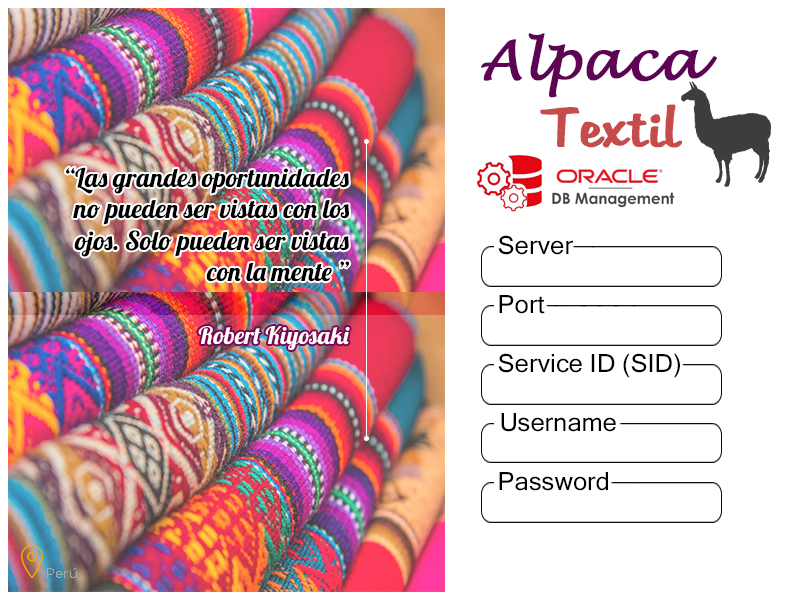
<style>
.page{position:relative;width:800px;height:600px;background:#ffffff}
.page>*{position:absolute;margin:0}
.t1{font:53.6px "LucidaHandwriting-Italic";color:#5f0455;font-weight:bold}
.t2{font:53.6px "Martina";color:#c64c4c;font-weight:bold}
.t3{font:26px "Lobster-Regular";color:#000000}
.t4{font:25px "MicrosoftSansSerif";color:#000000}
.t5{font:24px "Lobster-Regular";color:#fefeff}
.t6{font:14px "GothamBook";color:#aaa9a9}
</style>
<div class="page">
<p class="t1" style="left:481px;top:33px;width:236px;height:65px">Alpaca</p>
<p class="t2" style="left:540px;top:104px;width:142px;height:44px">Textil</p>
<p class="t3" style="left:66px;top:167px;width:284px;height:115px;text-align:right">“Las grandes oportunidades <br>no pueden ser vistas con los <br>ojos. Solo pueden ser vistas<br>con la mente ”</p>
<p class="t4" style="left:498px;top:235px;width:75px;height:20px">Server</p>
<p class="t4" style="left:499px;top:295px;width:46px;height:19px">Port</p>
<p class="t5" style="left:198px;top:326px;width:152px;height:24px">Robert Kiyosaki</p>
<p class="t4" style="left:498px;top:353px;width:182px;height:25px">Service ID (SID)</p>
<p class="t4" style="left:501px;top:413px;width:115px;height:19px">Username</p>
<p class="t4" style="left:499px;top:472px;width:109px;height:19px">Password</p>
<p class="t6" style="left:47px;top:568px;width:30px;height:10px">Perú</p>
</div>
